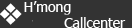
<style>
.page{position:relative;width:132px;height:28px;background:#333333}
.page>*{position:absolute;margin:0}
.t1{font:14px "Tahoma";color:#ffffff}
</style>
<div class="page">
<p class="t1" style="left:24px;top:1px;width:102px;height:27px">H’mong <br>  Callcenter</p>
</div>
